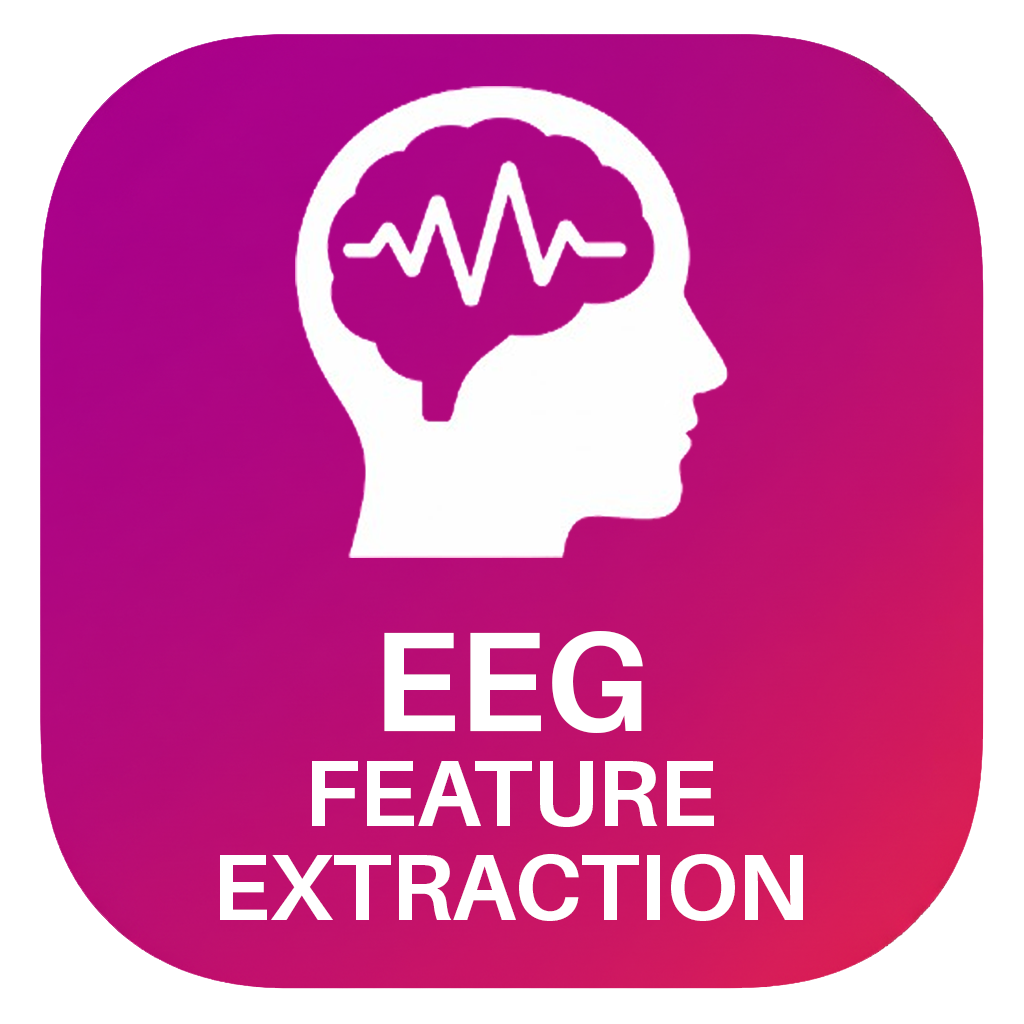
<style>
.page{position:relative;width:1024px;height:1024px;background:#ffffff}
.page>*{position:absolute;margin:0}
.t1{font:94.3px/94.3px "Aileron-Bold";letter-spacing:-0.005em;color:#ffffff}
.t2{font:141.5px/94.3px "Aileron-Bold";letter-spacing:-0.005em;color:#ffffff}
</style>
<div class="page">
<p class="t1" style="left:220px;top:631px;width:583px;height:290px;text-align:center"><span class="t2">EEG<br></span>FEATURE<br>EXTRACTION</p>
</div>
